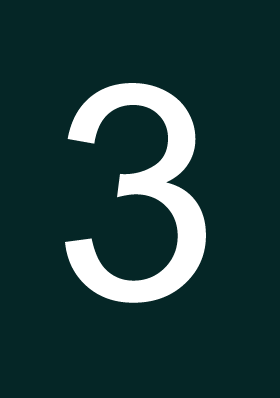
<style>
.page{position:relative;width:280px;height:398px;background:#052626}
.page>*{position:absolute;margin:0}
.t1{font:300px "ArialMT";color:#ffffff}
</style>
<div class="page">
<p class="t1" style="left:65px;top:83px;width:141px;height:220px">3</p>
</div>
